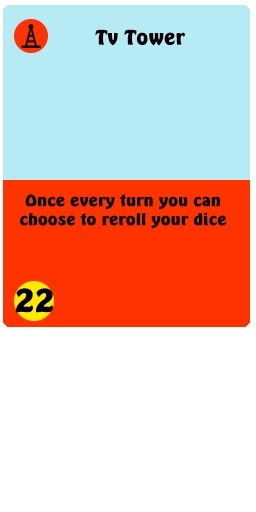
<style>
.page{position:relative;width:256px;height:512px;background:#ffffff}
.page>*{position:absolute;margin:0}
.t1{font:20.5px "Emmett";color:#000000;scale:1.03 1}
.t2{font:16.2px/19px "Emmett";color:#000000;scale:1.07 1}
.t3{font:32.4px "Emmett";color:#000000;scale:1.07 1}
</style>
<div class="page">
<p class="t1" style="left:95px;top:29px;width:90px;height:17px">Tv Tower</p>
<p class="t2" style="left:20px;top:194px;width:206px;height:35px;text-align:center">Once every turn you can choose to reroll your dice</p>
<p class="t3" style="left:16px;top:288px;width:37px;height:25px">22</p>
</div>
